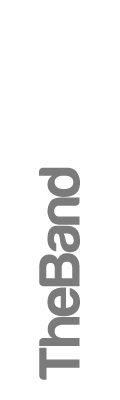
<style>
.page{position:relative;width:120px;height:400px;background:#ffffff}
.page>*{position:absolute;margin:0}
.t1{font:60px "Harabara-Bold";color:#7b7b7b}
</style>
<div class="page">
<p class="t1" style="left:39px;top:167px;width:41px;height:213px;rotate:-90deg">TheBand</p>
</div>
